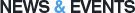
<style>
.page{position:relative;width:135px;height:13px;background:#ffffff}
.page>*{position:absolute;margin:0}
.t1{font:18px "Swiss721BT-Bold";letter-spacing:-0.05em;color:#1d2328;text-transform:uppercase}
.t2{font:18px "Swiss721BT-Bold";letter-spacing:-0.05em;color:#4c9de2;text-transform:uppercase}
</style>
<div class="page">
<p class="t1" style="left:0px;top:0px;width:135px;height:13px">News<span class="t2"> &amp;</span> Events</p>
</div>
